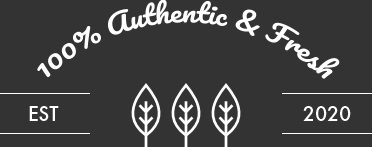
<style>
.page{position:relative;width:372px;height:147px;background:#333333}
.page>*{position:absolute;margin:0}
.t1{font:25px "Pacifico-Regular";color:#ffffff}
.t2{font:21.5px "FuturaPT-Medium";color:#ffffff}
</style>
<div class="page">
<p class="t1" style="left:37px;top:0px;width:303px;height:79px">100% Authentic &amp; Fresh</p>
<p class="t2" style="left:29px;top:106px;width:30px;height:15px">EST</p>
<p class="t2" style="left:303px;top:106px;width:48px;height:15px">2020</p>
</div>
